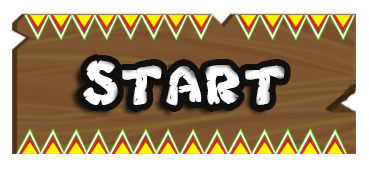
<style>
.page{position:relative;width:369px;height:170px;background:#ffffff}
.page>*{position:absolute;margin:0}
.t1{font:81.7px "Chlorinar";color:#11100f}
</style>
<div class="page">
<p class="t1" style="left:77px;top:54px;width:214px;height:58px">start</p>
</div>
